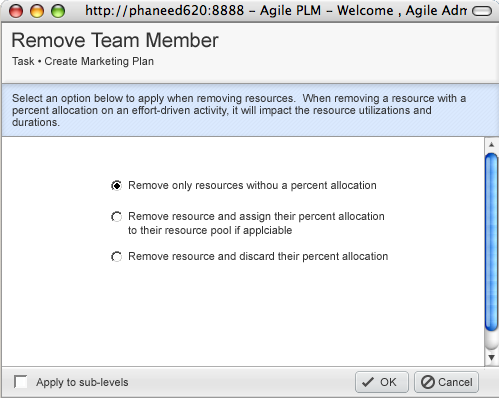
<style>
.page{position:relative;width:499px;height:398px;background:#ffffff}
.page>*{position:absolute;margin:0}
.t1{font:20px "ArialMT";color:#333333}
.t2{font:11px "ArialMT";color:#333333}
.t3{font:11px/12px "ArialMT";color:#333333}
.t4{font:11px/14px "ArialMT";color:#333333}
</style>
<div class="page">
<p class="t1" style="left:12px;top:32px;width:207px;height:16px">Remove Team Member</p>
<p class="t2" style="left:12px;top:57px;width:142px;height:11px">Task • Create Marketing Plan</p>
<p class="t3" style="left:12px;top:94px;width:454px;height:32px">Select an option below to apply when removing resources.  When removing a resource with a<br>percent allocation on an effort-driven activity, it will impact the resource utilizations and<br>durations.</p>
<p class="t2" style="left:129px;top:181px;width:247px;height:11px">Remove only resources withou a percent allocation</p>
<p class="t4" style="left:128px;top:212px;width:256px;height:25px">Remove resource and assign their percent allocation<br>to their resource pool if applciable</p>
<p class="t2" style="left:129px;top:252px;width:259px;height:11px">Remove resource and discard their percent allocation</p>
<p class="t2" style="left:36px;top:378px;width:92px;height:11px">Apply to sub-levels</p>
<p class="t2" style="left:380px;top:378px;width:17px;height:8px">OK</p>
<p class="t2" style="left:438px;top:378px;width:34px;height:8px">Cancel</p>
</div>
